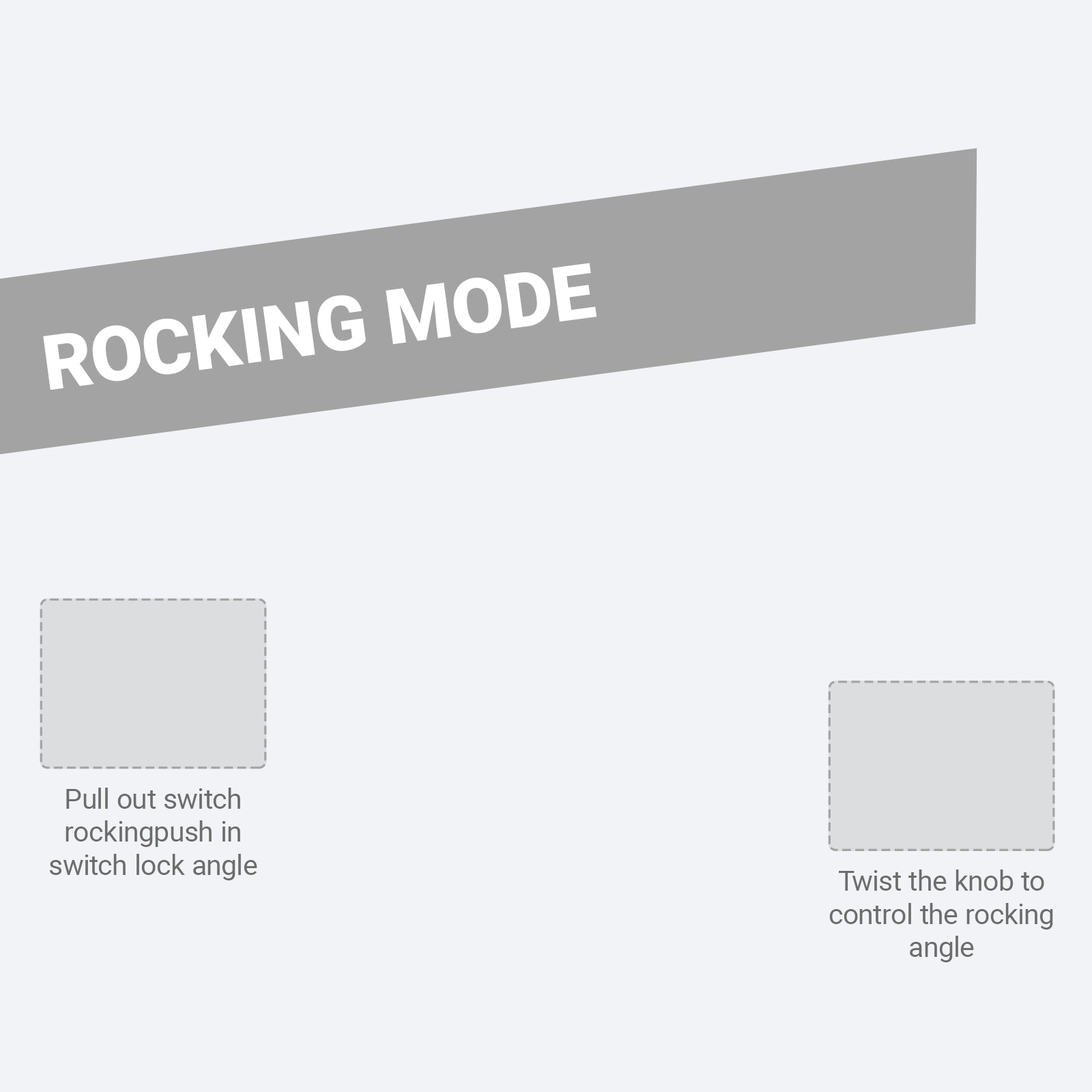
<style>
.page{position:relative;width:1092px;height:1092px;background:#f2f3f6}
.page>*{position:absolute;margin:0}
.t1{font:76.1px "Roboto-Black";color:#ffffff}
.t2{font:27.7px "Roboto-Regular";color:#6c6c6c}
</style>
<div class="page">
<p class="t1" style="left:43px;top:263px;width:554px;height:127px;rotate:-8deg">ROCKING MODE</p>
<p class="t2" style="left:49px;top:788px;width:208px;height:92px;text-align:center">Pull out switch<br>rockingpush in<br>switch lock angle</p>
<p class="t2" style="left:829px;top:869px;width:224px;height:93px;text-align:center">Twist the knob to<br>control the rocking<br>angle</p>
</div>
